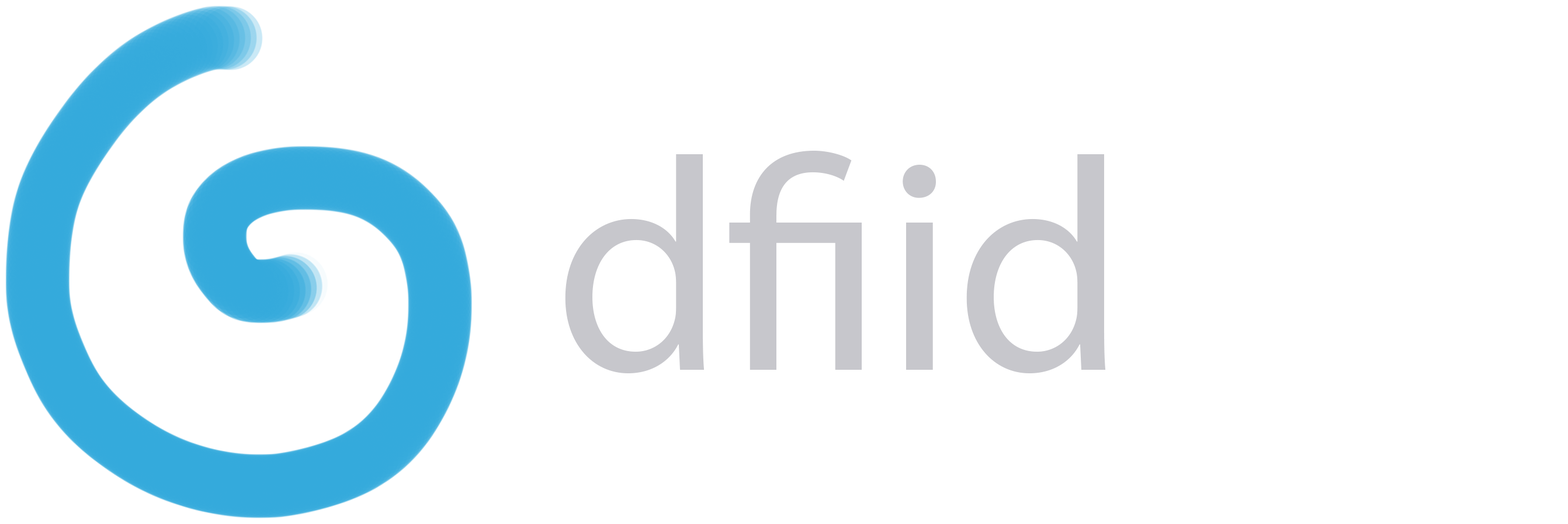
<style>
.page{position:relative;width:1568px;height:524px;background:#ffffff}
.page>*{position:absolute;margin:0}
.t1{font:303.8px "MyriadPro-Regular";color:#c7c7cc}
</style>
<div class="page">
<p class="t1" style="left:565px;top:150px;width:541px;height:224px">dfiid</p>
</div>
